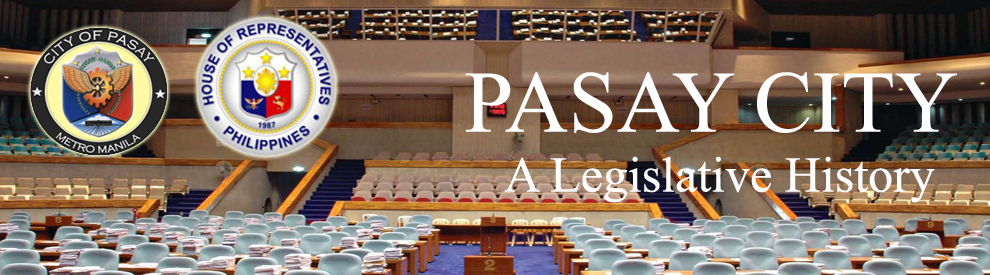
<style>
.page{position:relative;width:990px;height:275px}
.page>*{position:absolute;margin:0}
.t1{font:50px "TimesNewRomanPSMT";color:#fdfcfc}
.t2{font:87.5px "TimesNewRomanPSMT";color:#fdfdfd}
</style>
<div class="page">
<p class="t1" style="left:465px;top:72px;width:492px;height:131px;text-align:center"><span class="t2">PASAY CITY<br></span>A Legislative History</p>
</div>
